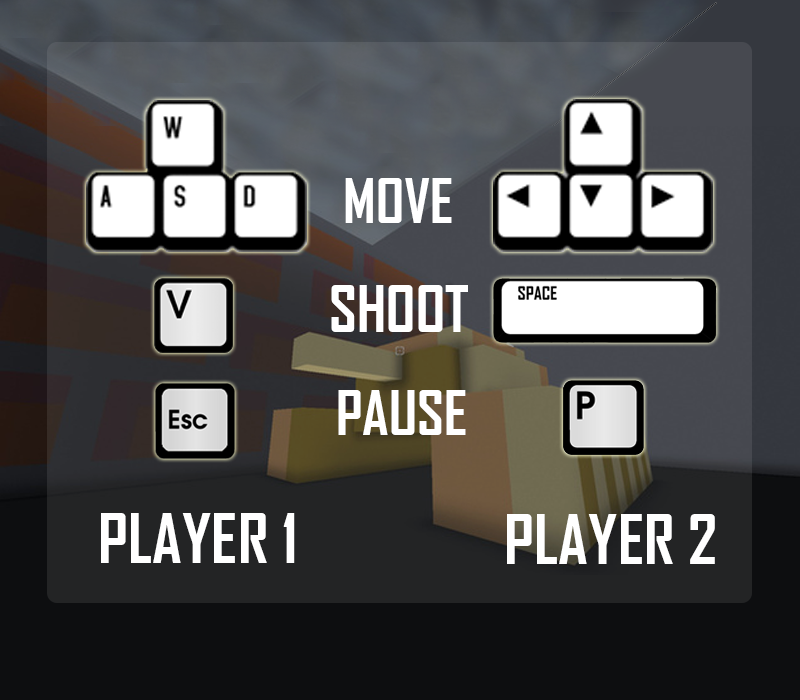
<style>
.page{position:relative;width:800px;height:700px}
.page>*{position:absolute;margin:0}
.t1{font:58.9px "AgencyFB-Bold";color:#ffffff}
.t2{font:61.2px "AgencyFB-Bold";color:#ffffff}
.t3{font:66.4px "AgencyFB-Bold";color:#ffffff}
</style>
<div class="page">
<p class="t1" style="left:345px;top:178px;width:107px;height:45px">MOVE</p>
<p class="t2" style="left:331px;top:285px;width:137px;height:47px">SHOOT</p>
<p class="t1" style="left:338px;top:390px;width:128px;height:45px">PAUSE</p>
<p class="t3" style="left:101px;top:513px;width:194px;height:50px">PLAYER 1</p>
<p class="t3" style="left:507px;top:514px;width:208px;height:50px">PLAYER 2</p>
</div>
